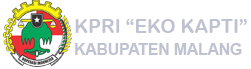
<style>
.page{position:relative;width:251px;height:69px;background:#ffffff}
.page>*{position:absolute;margin:0}
.t1{font:19.1px "ArialRoundedMTBold";color:#fffefe}
.t2{font:15.6px "Arial-BoldMT";color:#ffffff}
</style>
<div class="page">
<p class="t1" style="left:75px;top:19px;width:172px;height:14px">KPRI “EKO KAPTI”</p>
<p class="t2" style="left:75px;top:43px;width:167px;height:12px">KABUPATEN MALANG</p>
</div>
